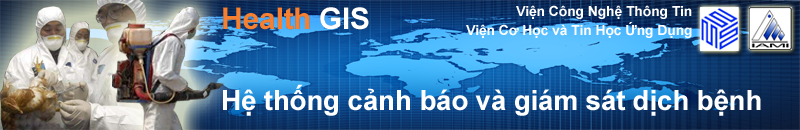
<style>
.page{position:relative;width:800px;height:130px}
.page>*{position:absolute;margin:0}
.t1{font:14px "Arial-BoldMT";letter-spacing:-0.01em;color:#ffffff}
.t2{font:30px "Arial-BoldMT";letter-spacing:-0.01em;color:#f58031}
.t3{font:30px "Arial-BoldMT";letter-spacing:-0.01em;color:#ffffff}
.t4{font:28px "Arial-BoldMT";letter-spacing:-0.01em;color:#ffffff}
</style>
<div class="page">
<p class="t1" style="left:516px;top:5px;width:176px;height:14px">Viện Công Nghệ Thông Tin</p>
<p class="t2" style="left:223px;top:7px;width:146px;height:23px">Health <span class="t3">GIS</span></p>
<p class="t1" style="left:466px;top:22px;width:226px;height:16px">Viện Cơ Học và Tin Học Ứng Dụng</p>
<p class="t4" style="left:223px;top:84px;width:538px;height:32px">Hệ thống cảnh báo và giám sát dịch bệnh</p>
</div>
